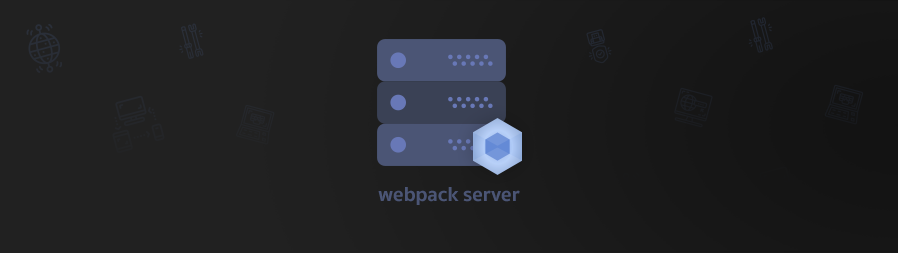
<style>
.page{position:relative;width:898px;height:253px;background:#212121}
.page>*{position:absolute;margin:0}
.t1{font:20.7px "SukhumvitSet-Bold";color:#4b5575}
</style>
<div class="page">
<p class="t1" style="left:378px;top:187px;width:142px;height:18px">webpack server</p>
</div>
